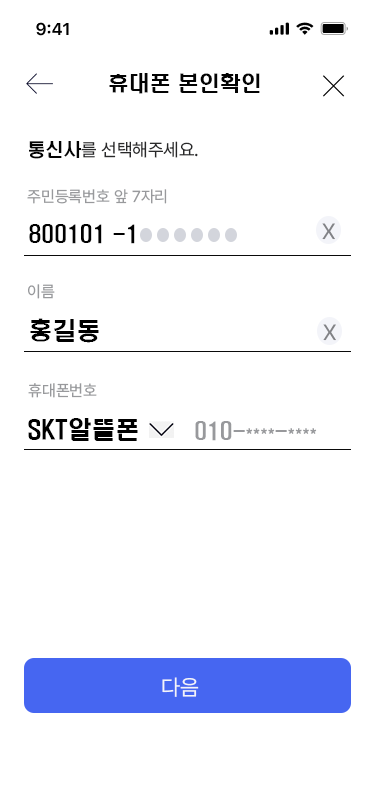
<style>
.page{position:relative;width:375px;height:812px;background:#ffffff}
.page>*{position:absolute;margin:0}
.t1{font:21px "H2hdrM";color:#030303}
.t2{font:18px "Pretendard-Regular";color:#29292a}
.t3{font:18px "H2hdrM";color:#030303}
.t4{font:16px "Pretendard-Regular";color:#98999c}
.t5{font:22px "H2hdrM";color:#000000}
.t6{font:22px "Pretendard-Regular";color:#818286}
.t7{font:24px "H2hdrM";color:#000000}
.t8{font:22px "H2hdrM";color:#98999c}
.t9{font:22px "Pretendard-Regular";color:#f3f4f9}
</style>
<div class="page">
<p class="t1" style="left:109px;top:73px;width:151px;height:21px">휴대폰 본인확인</p>
<p class="t2" style="left:29px;top:141px;width:169px;height:18px"><span class="t3">통신사</span>를 선택해주세요.</p>
<p class="t4" style="left:27px;top:189px;width:140px;height:15px">주민등록번호 앞 7자리</p>
<p class="t5" style="left:29px;top:224px;width:106px;height:20px">800101 -1</p>
<p class="t6" style="left:322px;top:223px;width:13px;height:17px">X</p>
<p class="t4" style="left:28px;top:284px;width:27px;height:15px">이름</p>
<p class="t7" style="left:30px;top:318px;width:69px;height:25px">홍길동</p>
<p class="t6" style="left:323px;top:324px;width:13px;height:17px">X</p>
<p class="t4" style="left:28px;top:383px;width:69px;height:15px">휴대폰번호</p>
<p class="t7" style="left:28px;top:418px;width:110px;height:23px">SKT알뜰폰</p>
<p class="t8" style="left:195px;top:421px;width:122px;height:20px">010-****-****</p>
<p class="t9" style="left:162px;top:677px;width:37px;height:20px">다음</p>
</div>
